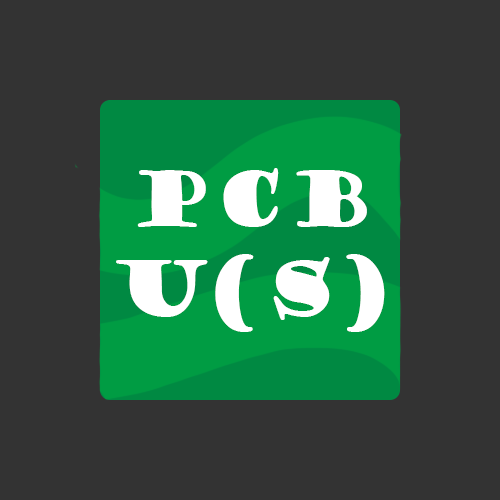
<style>
.page{position:relative;width:500px;height:500px;background:#333333}
.page>*{position:absolute;margin:0}
.t1{font:75px "GoudyStout";color:#ffffff}
</style>
<div class="page">
<p class="t1" style="left:116px;top:168px;width:269px;height:164px;text-align:center">PCB<br>U(s)</p>
</div>
